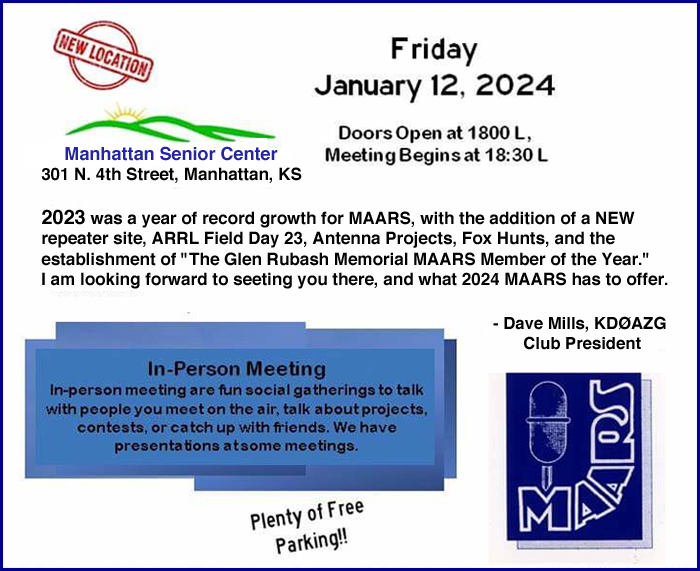
<style>
.page{position:relative;width:700px;height:571px;background:#fefefe}
.page>*{position:absolute;margin:0}
.t1{font:17px "Helvetica-Bold";color:#000000}
.t2{font:16.7px "Helvetica-Bold";color:#000000}
.t3{font:18px "Helvetica-Bold";color:#2525a1}
.t4{font:20px "Helvetica-Bold";color:#000000}
</style>
<div class="page">
<p class="t1" style="left:41px;top:146px;width:627px;height:204px"><span class="t2">     </span><span class="t3">Manhattan Senior Center<br></span><span class="t2">3</span>01 N. 4th Street, Manhattan, KS<br><br><span class="t4">2023</span> was a year of record growth for MAARS, with the addition of a NEW<br>repeater site, ARRL Field Day 23, Antenna Projects, Fox Hunts, and the<br>establishment of "The Glen Rubash Memorial MAARS Member of the Year."<br>I am looking forward to seeting you there, and what 2024 MAARS has to offer.<br><br><span class="t2">                  - Dave Mills, KDØAZG<br>                                                                                                        Club President</span></p>
</div>
